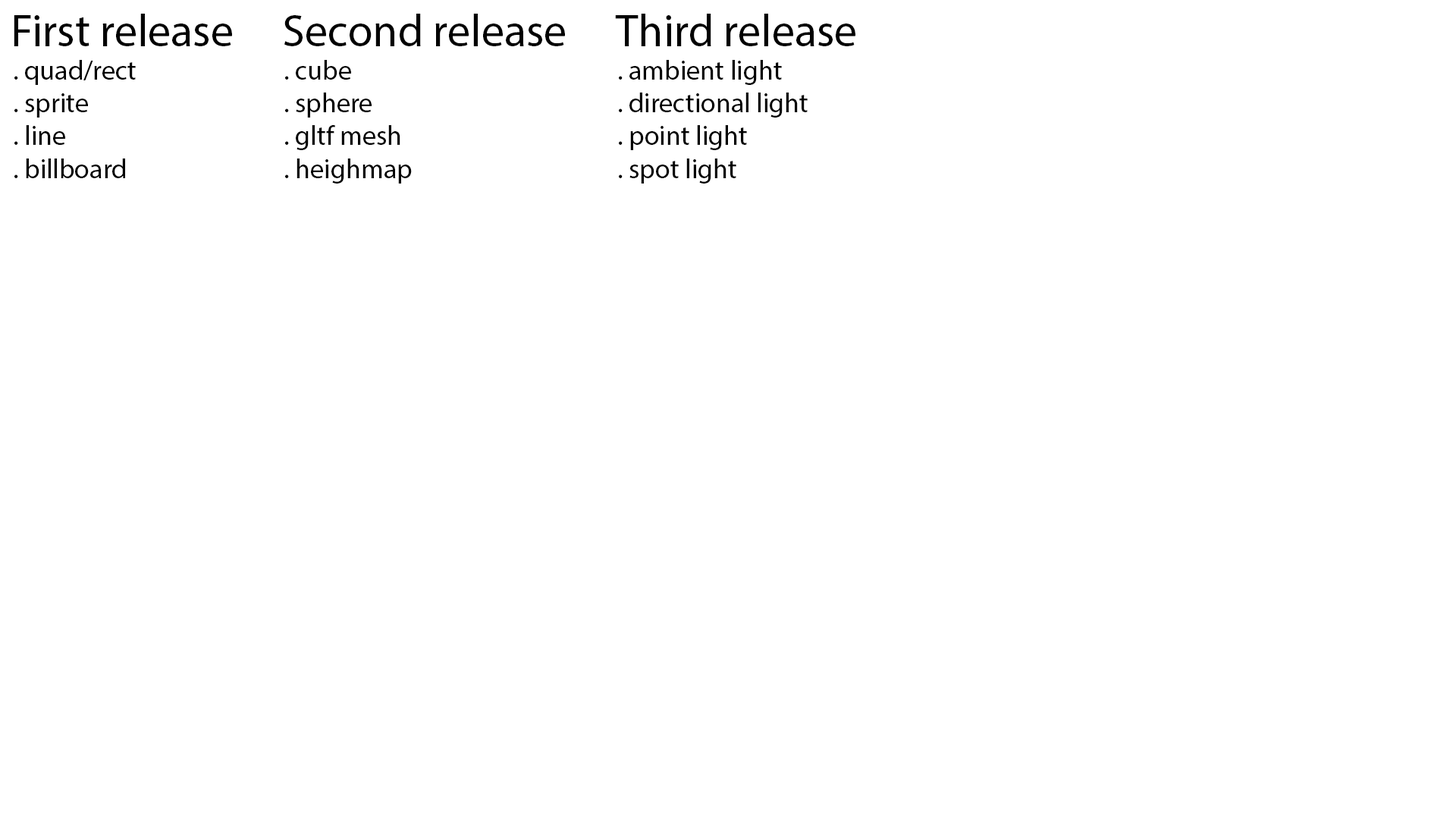
<style>
.page{position:relative;width:1456px;height:819px;background:#ffffff}
.page>*{position:absolute;margin:0}
.t1{font:45.5px "MyriadPro-Regular";color:#000000}
.t2{font:27.3px "MyriadPro-Regular";color:#000000}
</style>
<div class="page">
<p class="t1" style="left:14px;top:14px;width:218px;height:32px">First release</p>
<p class="t1" style="left:284px;top:14px;width:281px;height:32px">Second release</p>
<p class="t1" style="left:615px;top:14px;width:240px;height:32px">Third release</p>
<p class="t2" style="left:14px;top:60px;width:122px;height:118px">. quad/rect<br>. sprite<br>. line<br>. billboard</p>
<p class="t2" style="left:285px;top:60px;width:127px;height:124px">. cube<br>. sphere<br>. gltf mesh<br>. heighmap</p>
<p class="t2" style="left:619px;top:60px;width:189px;height:124px">. ambient light<br>. directional light<br>. point light<br>. spot light</p>
</div>
